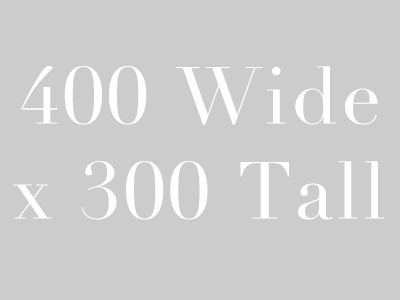
<style>
.page{position:relative;width:400px;height:300px;background:#cccccc}
.page>*{position:absolute;margin:0}
.t1{font:79.2px "Didot";letter-spacing:0.04em;color:#ffffff}
</style>
<div class="page">
<p class="t1" style="left:13px;top:66px;width:371px;height:154px;text-align:center">400 Wide x 300 Tall</p>
</div>
